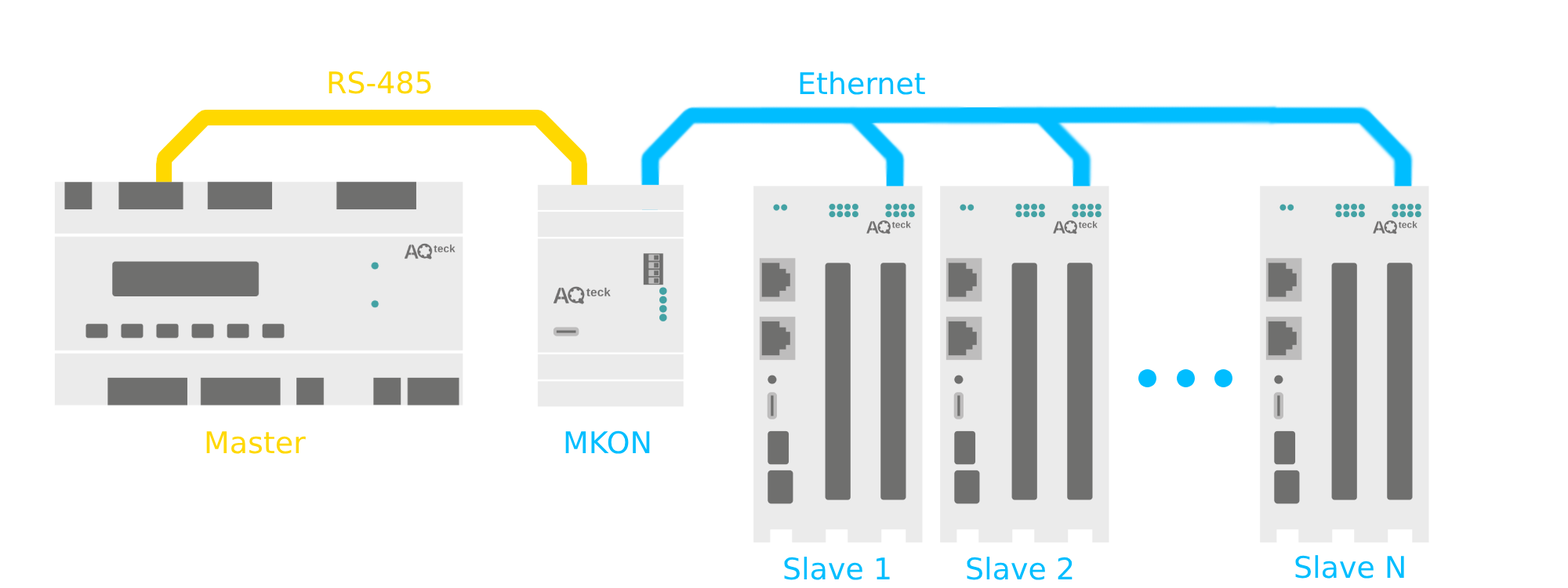
<style>
.page{position:relative;width:1568px;height:588px;background:#ffffff}
.page>*{position:absolute;margin:0}
.t1{font:29.8px "DejaVuSans";color:#ffd800}
.t2{font:29.8px "DejaVuSans";color:#00beff}
.t3{font:29.8px "DejaVuSans";color:#00bdff}
</style>
<div class="page">
<p class="t1" style="left:328px;top:71px;width:103px;height:23px">RS-485</p>
<p class="t2" style="left:800px;top:71px;width:125px;height:24px"><span class="t1">E</span>thernet</p>
<p class="t1" style="left:206px;top:431px;width:100px;height:23px">Master</p>
<p class="t2" style="left:565px;top:430px;width:85px;height:24px">MKON</p>
<p class="t2" style="left:784px;top:557px;width:106px;height:23px">Slave 1</p>
<p class="t2" style="left:967px;top:557px;width:106px;height:23px">Slave 2</p>
<p class="t2" style="left:1295px;top:555px;width:109px;height:24px"><span class="t3">S</span>lave N</p>
</div>
